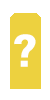
<style>
.page{position:relative;width:50px;height:100px;background:#ffffff}
.page>*{position:absolute;margin:0}
.t1{font:37px "HeadlineR-HM";color:#ffffff}
</style>
<div class="page">
<p class="t1" style="left:14px;top:34px;width:22px;height:33px">?</p>
</div>
